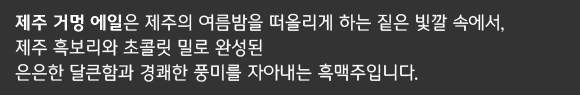
<style>
.page{position:relative;width:580px;height:95px;background:#333333}
.page>*{position:absolute;margin:0}
.t1{font:18px/25px "MICEGothic";color:#ffffff}
.t2{font:18px/25px "MICEGothicBold";color:#ffffff}
</style>
<div class="page">
<p class="t1" style="left:15px;top:13px;width:489px;height:69px"><span class="t2">제주 거멍 에일</span>은 제주의 여름밤을 떠올리게 하는 짙은 빛깔 속에서,<br>제주 흑보리와 초콜릿 밀로 완성된<br>은은한 달큰함과 경쾌한 풍미를 자아내는 흑맥주입니다.</p>
</div>
